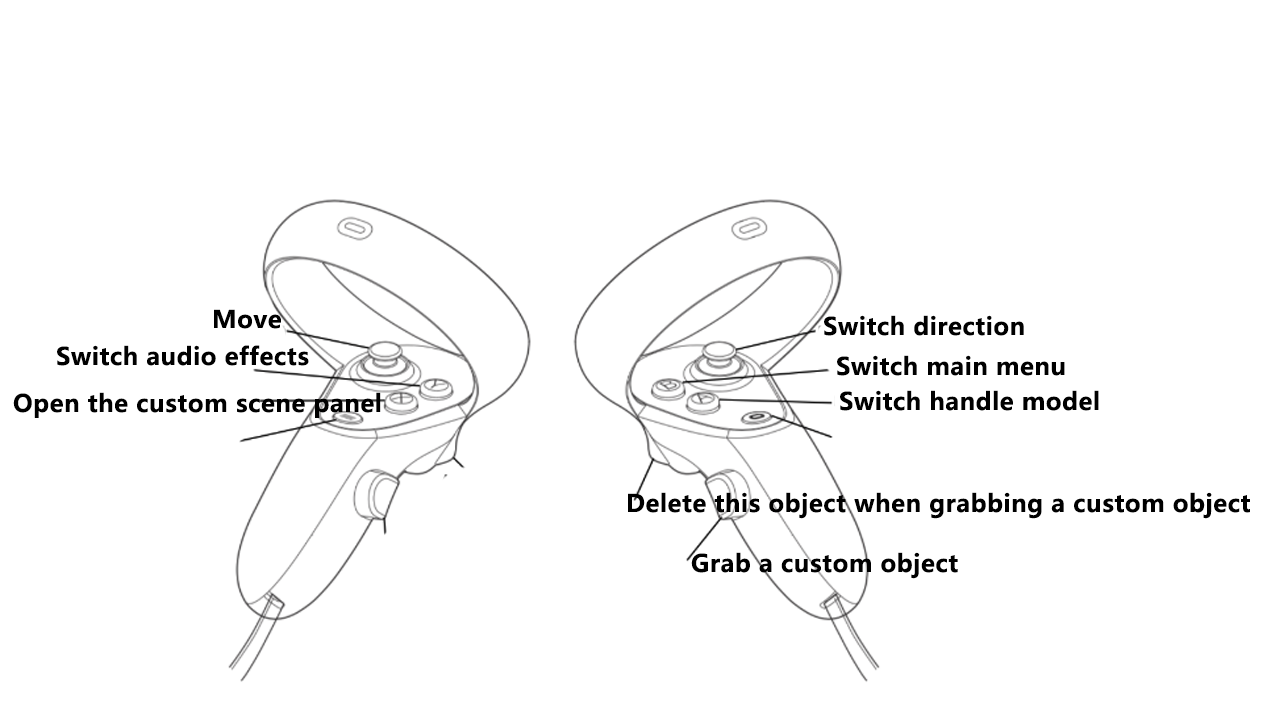
<style>
.page{position:relative;width:1280px;height:720px;background:#ffffff}
.page>*{position:absolute;margin:0}
.t1{font:24px "MicrosoftYaHeiUI-Bold";letter-spacing:0.02em;color:#000000}
</style>
<div class="page">
<p class="t1" style="left:214px;top:309px;width:67px;height:20px">Move</p>
<p class="t1" style="left:824px;top:315px;width:200px;height:21px">Switch direction</p>
<p class="t1" style="left:57px;top:345px;width:252px;height:21px">Switch audio effects</p>
<p class="t1" style="left:837px;top:355px;width:228px;height:21px">Switch main menu</p>
<p class="t1" style="left:840px;top:390px;width:259px;height:21px">Switch handle model</p>
<p class="t1" style="left:13px;top:392px;width:368px;height:26px">Open the custom scene panel</p>
<p class="t1" style="left:628px;top:492px;width:622px;height:27px">Delete this object when grabbing a custom object</p>
<p class="t1" style="left:691px;top:552px;width:267px;height:27px">Grab a custom object</p>
</div>
